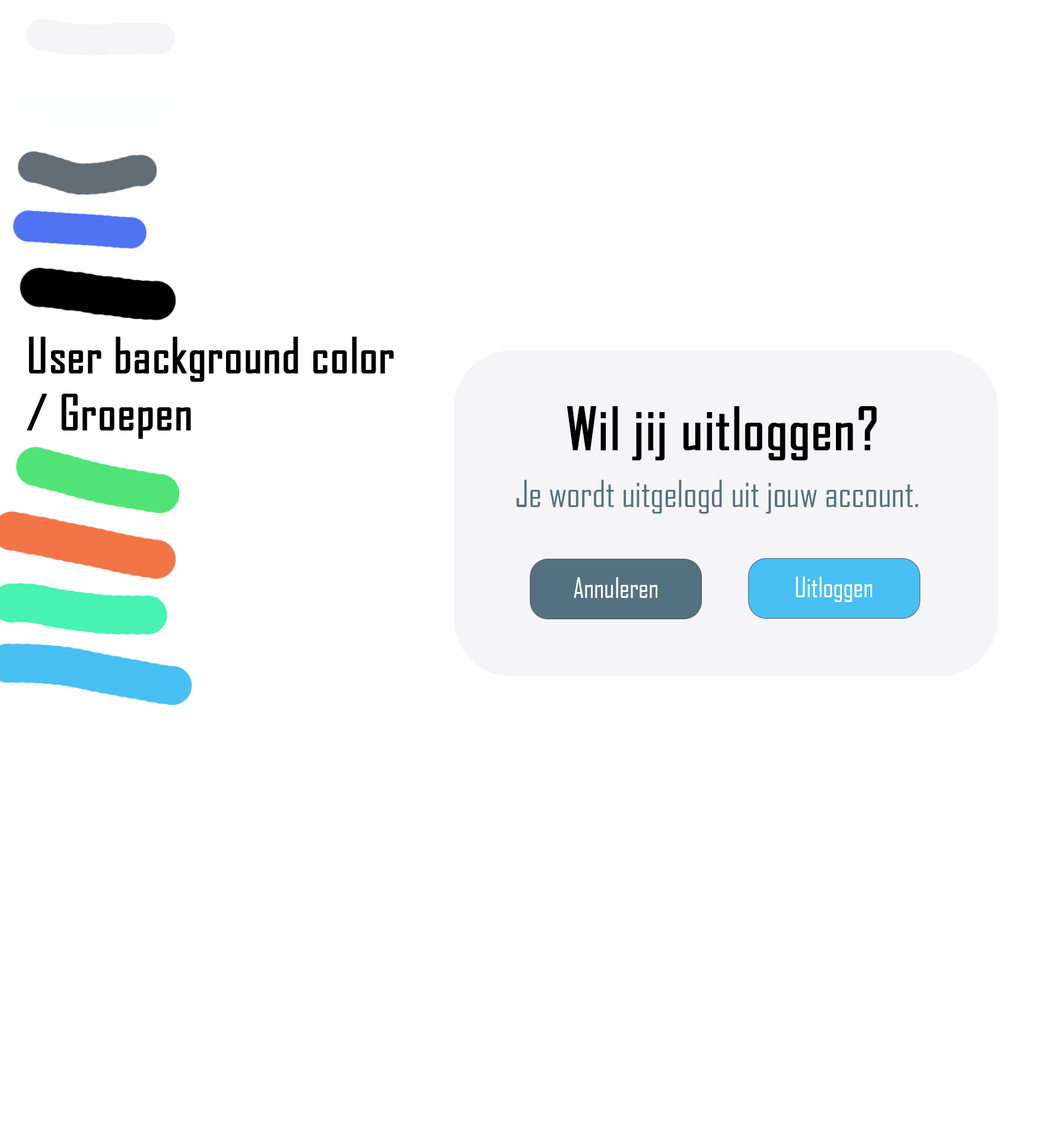
<style>
.page{position:relative;width:1046px;height:1140px;background:#ffffff}
.page>*{position:absolute;margin:0}
.t1{font:47.5px "AgencyFB-Reg";color:#000000;font-weight:bold}
.t2{font:56.4px "AgencyFB-Reg";color:#000000;font-weight:bold}
.t3{font:35.6px "AgencyFB-Reg";color:#537180}
.t4{font:27.1px "AgencyFB-Reg";color:#ffffff}
</style>
<div class="page">
<p class="t1" style="left:27px;top:337px;width:367px;height:102px">User background color<br>/ Groepen</p>
<p class="t2" style="left:567px;top:406px;width:310px;height:55px">Wil jij uitloggen?</p>
<p class="t3" style="left:516px;top:480px;width:403px;height:33px">Je wordt uitgelogd uit jouw account.</p>
<p class="t4" style="left:574px;top:577px;width:84px;height:21px">Annuleren</p>
<p class="t4" style="left:796px;top:576px;width:76px;height:26px">Uitloggen</p>
</div>
